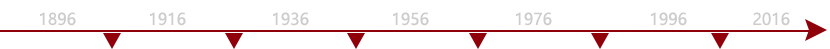
<style>
.page{position:relative;width:830px;height:49px;background:#ffffff}
.page>*{position:absolute;margin:0}
.t1{font:16px "MicrosoftYaHei";color:#cccccc}
</style>
<div class="page">
<p class="t1" style="left:40px;top:12px;width:36px;height:14px">1896</p>
<p class="t1" style="left:150px;top:12px;width:36px;height:14px">1916</p>
<p class="t1" style="left:273px;top:12px;width:36px;height:14px">1936</p>
<p class="t1" style="left:393px;top:12px;width:36px;height:14px">1956</p>
<p class="t1" style="left:516px;top:12px;width:36px;height:14px">1976</p>
<p class="t1" style="left:651px;top:12px;width:36px;height:14px">1996</p>
<p class="t1" style="left:753px;top:12px;width:37px;height:14px">2016</p>
</div>
